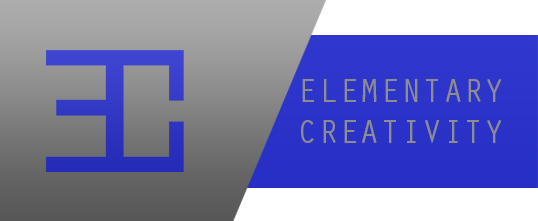
<style>
.page{position:relative;width:538px;height:221px}
.page>*{position:absolute;margin:0}
.t1{font:34.5px "OratorStd";color:#8d8d8d}
</style>
<div class="page">
<p class="t1" style="left:301px;top:79px;width:201px;height:64px;text-align:right">ELEMENTARY<br>CREATIVITY</p>
</div>
